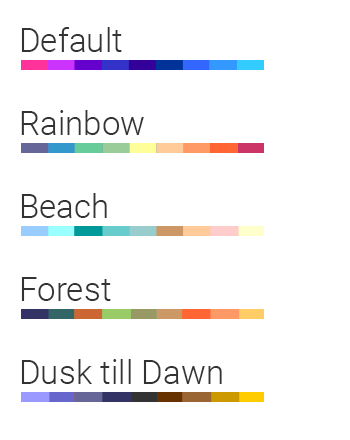
<style>
.page{position:relative;width:350px;height:440px;background:#ffffff}
.page>*{position:absolute;margin:0}
.t1{font:33.3px "Roboto-Light";color:#333333}
</style>
<div class="page">
<p class="t1" style="left:21px;top:27px;width:101px;height:25px">Default</p>
<p class="t1" style="left:21px;top:110px;width:123px;height:25px">Rainbow</p>
<p class="t1" style="left:21px;top:193px;width:86px;height:25px">Beach</p>
<p class="t1" style="left:21px;top:277px;width:90px;height:24px">Forest</p>
<p class="t1" style="left:21px;top:359px;width:201px;height:25px">Dusk till Dawn</p>
</div>
